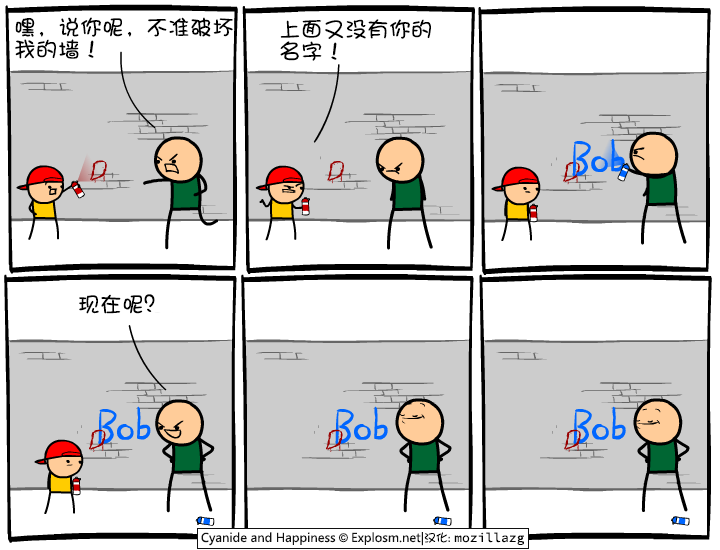
<style>
.page{position:relative;width:720px;height:550px;background:#ffffff}
.page>*{position:absolute;margin:0}
.t1{font:22px/22px "DFShaoNvW5";color:#000000}
.t2{font:22px "DFShaoNvW5";color:#000000}
</style>
<div class="page">
<p class="t1" style="left:15px;top:17px;width:218px;height:42px">嘿，说你呢，不准破坏<br>我的墙！</p>
<p class="t1" style="left:280px;top:19px;width:151px;height:42px">上面又没有你的<br>名字！</p>
<p class="t2" style="left:79px;top:294px;width:76px;height:20px">现在呢？</p>
</div>
